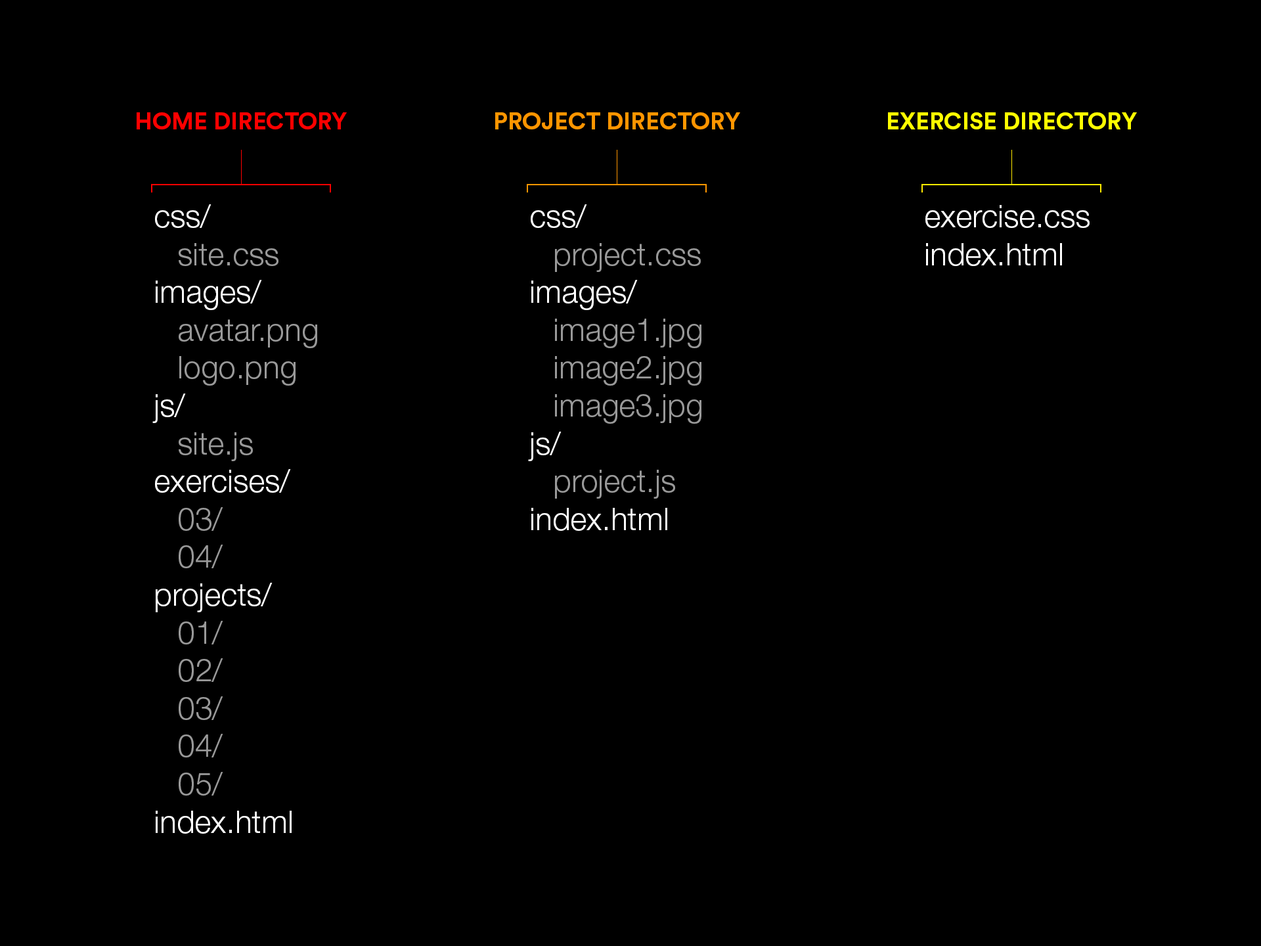
<style>
.page{position:relative;width:1261px;height:946px;background:#000000}
.page>*{position:absolute;margin:0}
.t1{font:23.6px "CircularStd-Bold";color:#ff0000;text-transform:uppercase}
.t2{font:23.6px "CircularStd-Bold";color:#ff9600;text-transform:uppercase}
.t3{font:23.6px "CircularStd-Bold";color:#ffff00;text-transform:uppercase}
.t4{font:31.5px "HelveticaNeueLTStd-Lt";color:#999999}
.t5{font:31.5px "HelveticaNeueLTStd-Lt";color:#ffffff}
</style>
<div class="page">
<p class="t1" style="left:137px;top:112px;width:210px;height:17px">home directory</p>
<p class="t2" style="left:495px;top:112px;width:245px;height:17px">PROJECT directory</p>
<p class="t3" style="left:888px;top:112px;width:249px;height:17px">exercise directory</p>
<p class="t4" style="left:152px;top:204px;width:165px;height:629px"><span class="t5">css/<br> </span>site.css<br><span class="t5">images/<br> </span>avatar.png<br> logo.png<br><span class="t5">js/<br> </span>site.js<br><span class="t5">exercises/</span><br> 03/<br> 04/<br><span class="t5">projects/<br> </span>01/<br> 02/<br> 03/<br> 04/<br> 05/<br><span class="t5">index.html</span></p>
<p class="t4" style="left:528px;top:204px;width:173px;height:327px"><span class="t5">css/<br> </span>project.css<br><span class="t5">images/<br> </span>image1.jpg<br> image2.jpg<br> image3.jpg<br><span class="t5">js/<br> </span>project.js<br><span class="t5">index.html</span></p>
<p class="t5" style="left:925px;top:205px;width:165px;height:61px">exercise.css<br>index.html</p>
</div>
